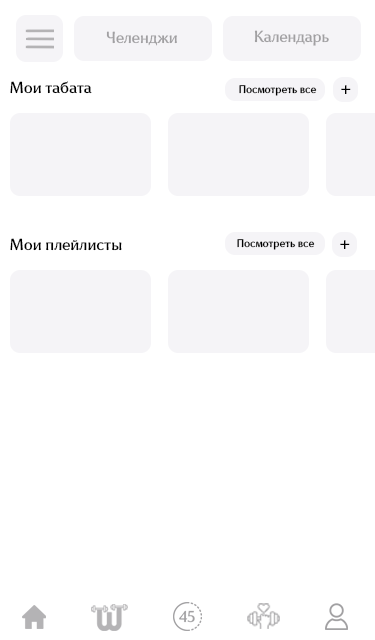
<style>
.page{position:relative;width:375px;height:640px;background:#ffffff}
.page>*{position:absolute;margin:0}
.t1{font:16px "Faberge-Regular";color:#a1a0a2}
.t2{font:16px "Faberge-Regular";color:#000000}
.t3{font:11px "Faberge-Regular";color:#000000}
.t4{font:24px "Faberge-Regular";color:#000000}
</style>
<div class="page">
<p class="t1" style="left:254px;top:30px;width:75px;height:16px">Календарь</p>
<p class="t1" style="left:106px;top:31px;width:71px;height:15px">Челенджи</p>
<p class="t2" style="left:10px;top:81px;width:82px;height:13px">Мои табата</p>
<p class="t3" style="left:239px;top:85px;width:78px;height:11px">Посмотреть все</p>
<p class="t4" style="left:341px;top:85px;width:10px;height:9px">+</p>
<p class="t2" style="left:10px;top:238px;width:112px;height:13px">Мои плейлисты</p>
<p class="t3" style="left:237px;top:239px;width:78px;height:11px">Посмотреть все</p>
<p class="t4" style="left:340px;top:240px;width:10px;height:9px">+</p>
</div>
